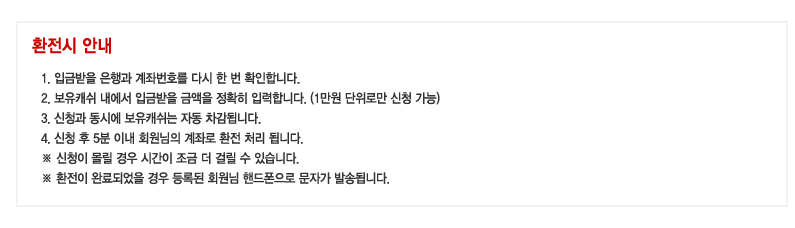
<style>
.page{position:relative;width:795px;height:228px;background:#ffffff}
.page>*{position:absolute;margin:0}
.t1{font:18px "YDIYGO340";color:#cc0000;scale:0.9 1}
.t2{font:13px/20px "YDIYGO330";letter-spacing:-0.025em;color:#333333;scale:0.9 1}
</style>
<div class="page">
<p class="t1" style="left:32px;top:37px;width:79px;height:17px">환전시 안내</p>
<p class="t2" style="left:41px;top:72px;width:399px;height:113px">1. 입금받을 은행과 계좌번호를 다시 한 번 확인합니다.<br>2. 보유캐쉬 내에서 입금받을 금액을 정확히 입력합니다. (1만원 단위로만 신청 가능)<br>3. 신청과 동시에 보유캐쉬는 자동 차감됩니다.<br>4. 신청 후 5분 이내 회원님의 계좌로 환전 처리 됩니다.<br>※ 신청이 몰릴 경우 시간이 조금 더 걸릴 수 있습니다.<br>※ 환전이 완료되었을 경우 등록된 회원님 핸드폰으로 문자가 발송됩니다.</p>
</div>
